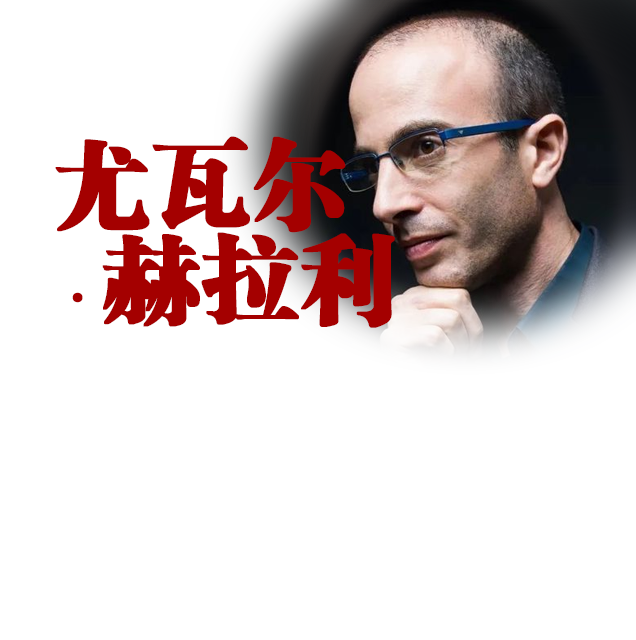
<style>
.page{position:relative;width:636px;height:640px;background:#ffffff}
.page>*{position:absolute;margin:0}
.t1{font:96px/96px "FZCSJW--GB1-0";color:#a40000;font-weight:bold}
.t2{font:48px/96px "FZCSJW--GB1-0";color:#a40000;font-weight:bold}
</style>
<div class="page">
<p class="t1" style="left:55px;top:136px;width:340px;height:192px">尤瓦尔<br><span class="t2">·</span>赫拉利</p>
</div>
